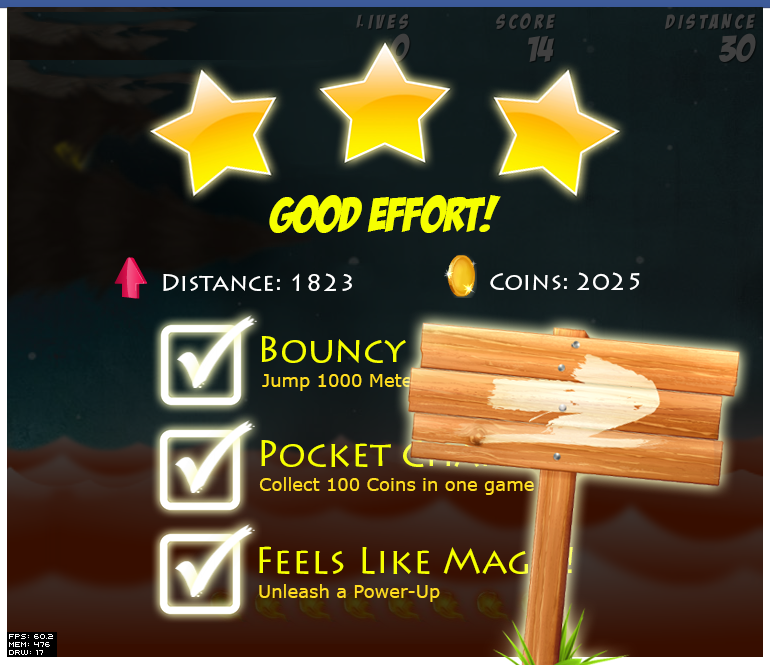
<style>
.page{position:relative;width:770px;height:665px}
.page>*{position:absolute;margin:0}
.t1{font:48px "BadaBoomBB";color:#f6ff00}
.t2{font:24px "LithosPro-Regular";color:#ffffff}
.t3{font:36px "LithosPro-Regular";color:#f6ff00}
.t4{font:18px "Verdana"}
.t5{font:36px "LithosPro-Regular"}
.t6{font:18px "Verdana";color:#ffdd1e}
</style>
<div class="page">
<p class="t1" style="left:269px;top:195px;width:232px;height:38px">GOOD EFFORT!</p>
<p class="t2" style="left:163px;top:273px;width:189px;height:18px">Distance: 1823</p>
<p class="t2" style="left:490px;top:272px;width:150px;height:18px">Coins: 2025</p>
<p class="t3" style="left:261px;top:336px;width:145px;height:27px">Bouncy</p>
<p class="t4" style="left:262px;top:374px;width:286px;height:17px">Jump 1000 Meters in one game</p>
<p class="t5" style="left:261px;top:440px;width:288px;height:27px">Pocket Change</p>
<p class="t6" style="left:259px;top:477px;width:275px;height:18px">Collect 100 Coins in one game</p>
<p class="t3" style="left:259px;top:546px;width:314px;height:28px">Feels Like Magic!</p>
<p class="t6" style="left:259px;top:584px;width:181px;height:18px">Unleash a Power-Up</p>
</div>
